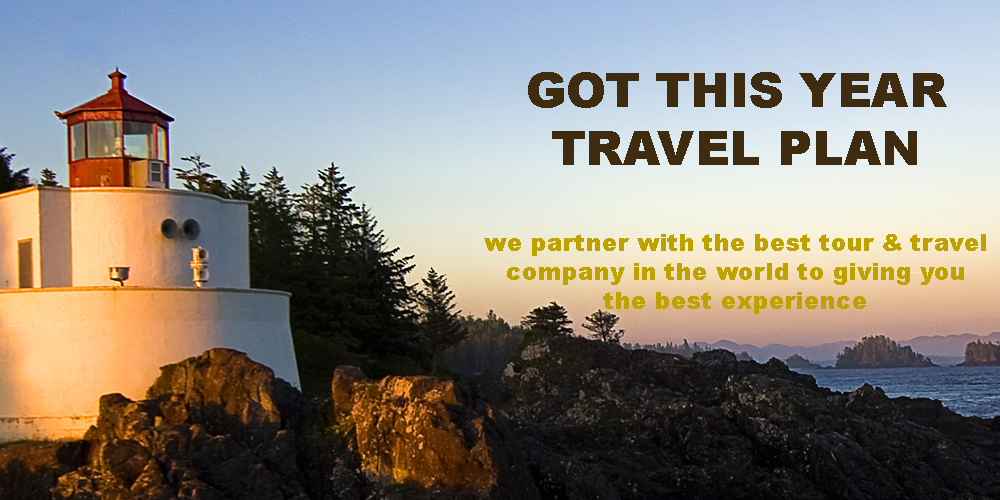
<style>
.page{position:relative;width:1000px;height:500px}
.page>*{position:absolute;margin:0}
.t1{font:24px "Arial-Black";color:#bea200}
.t2{font:48px "Arial-Black";color:#3e2b10}
</style>
<div class="page">
<p class="t1" style="left:484px;top:72px;width:502px;height:242px;text-align:center"><span class="t2">GOT THIS YEAR TRAVEL PLAN<br><br></span>we partner with the best tour &amp; travel company in the world to giving you the best experience</p>
</div>
